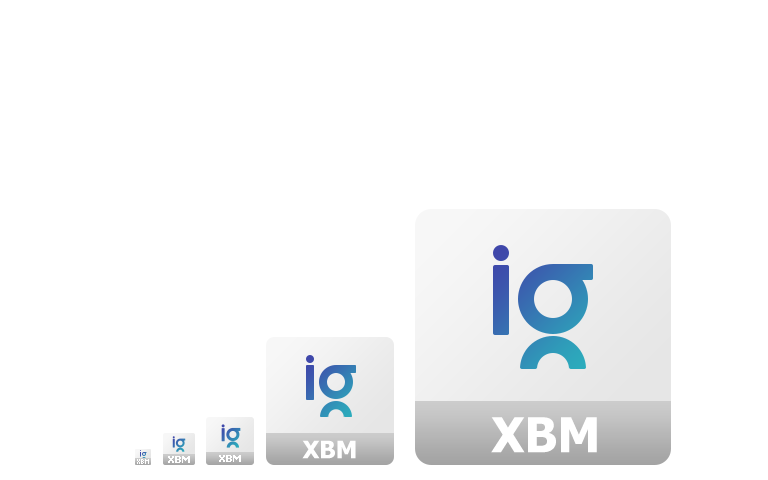
<style>
.page{position:relative;width:768px;height:480px;background:#ffffff}
.page>*{position:absolute;margin:0}
.t1{font:48px "Tahoma-Bold";color:#ffffff}
.t2{font:24px "Tahoma-Bold";color:#ffffff}
.t3{font:10px "Tahoma-Bold";color:#ffffff}
</style>
<div class="page">
<p class="t1" style="left:491px;top:417px;width:106px;height:36px">XBM</p>
<p class="t2" style="left:302px;top:440px;width:54px;height:19px">XBM</p>
<p class="t3" style="left:168px;top:456px;width:22px;height:7px">XBM</p>
<p class="t3" style="left:219px;top:455px;width:22px;height:7px">XBM</p>
</div>
